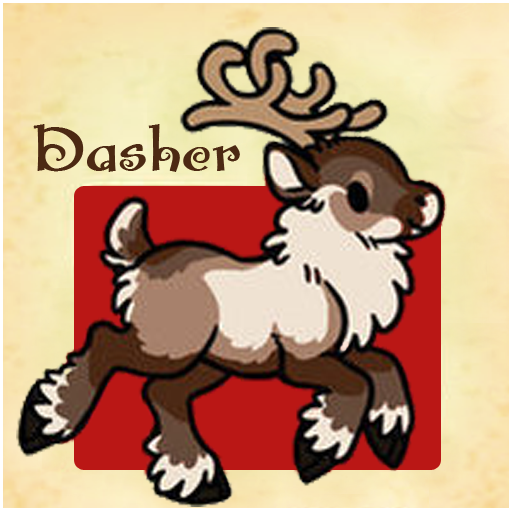
<style>
.page{position:relative;width:512px;height:512px}
.page>*{position:absolute;margin:0}
.t1{font:66.7px "SantasBigSecretBB";color:#4c2913}
</style>
<div class="page">
<p class="t1" style="left:33px;top:124px;width:207px;height:48px">Dasher</p>
</div>
